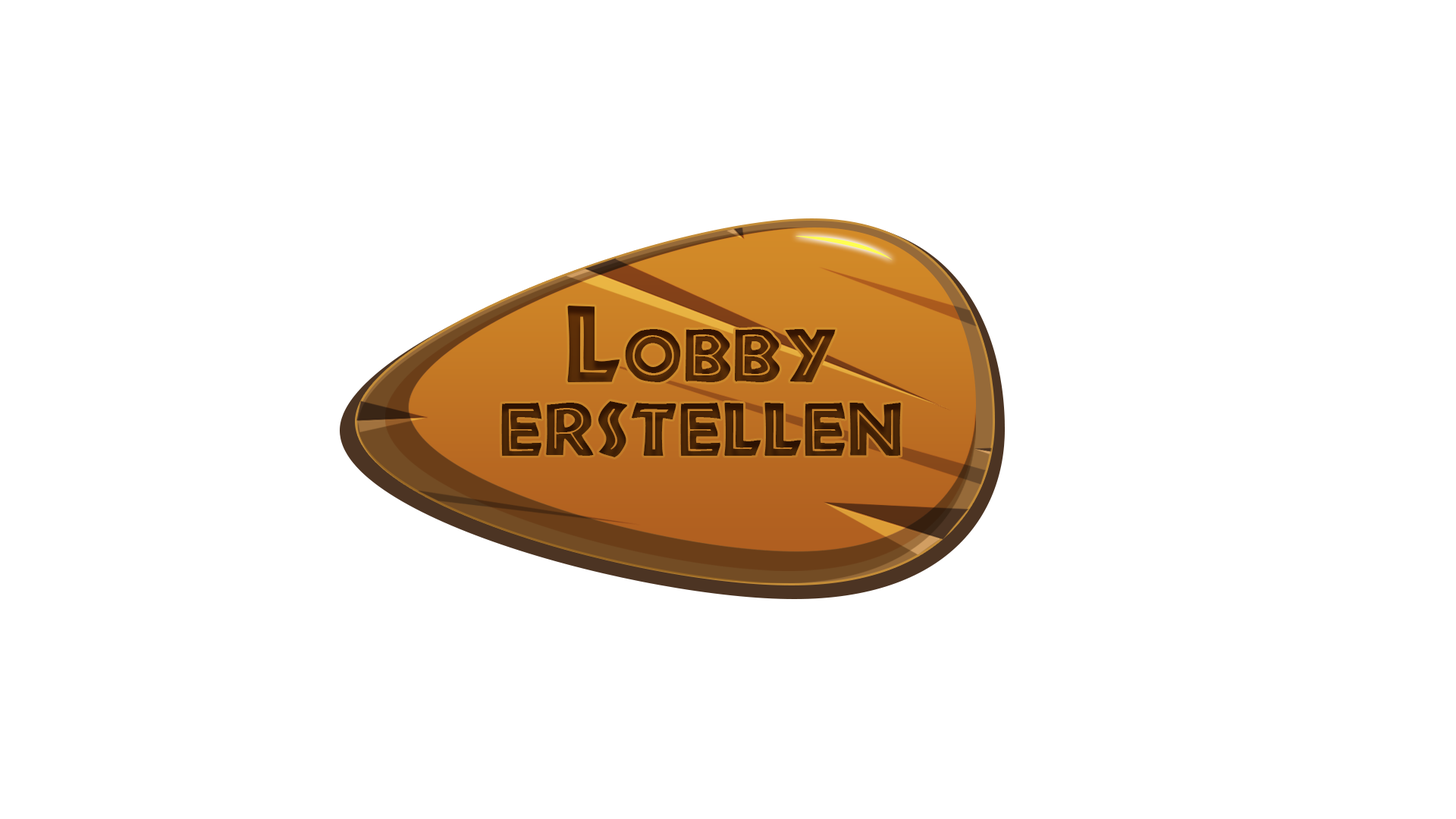
<style>
.page{position:relative;width:1456px;height:819px;background:#ffffff}
.page>*{position:absolute;margin:0}
.t1{font:100.1px/73.4px "African";color:#53320b;font-variant:small-caps}
</style>
<div class="page">
<p class="t1" style="left:501px;top:306px;width:400px;height:151px;text-align:center">Lobby <br>erstellen</p>
</div>
